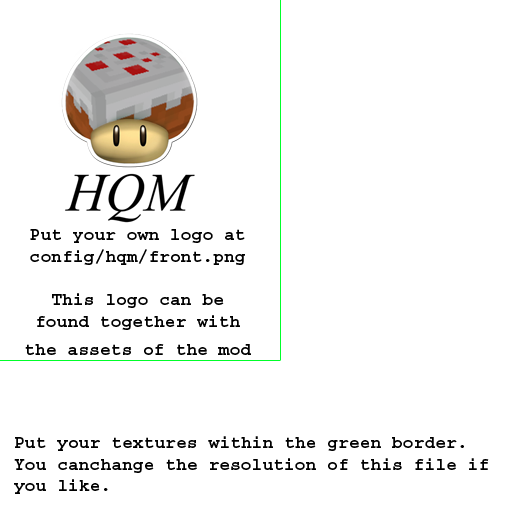
<style>
.page{position:relative;width:512px;height:512px;background:#ffffff}
.page>*{position:absolute;margin:0}
.t1{font:18px "Courier-Bold";color:#000000}
</style>
<div class="page">
<p class="t1" style="left:25px;top:229px;width:226px;height:126px;text-align:center">Put your own logo at<br>config/hqm/front.png<br><br>This logo can be<br>found together with<br>the assets of the mod</p>
<p class="t1" style="left:14px;top:436px;width:475px;height:58px">Put your textures within the green border. <br>You canchange the resolution of this file if <br>you like.</p>
</div>
